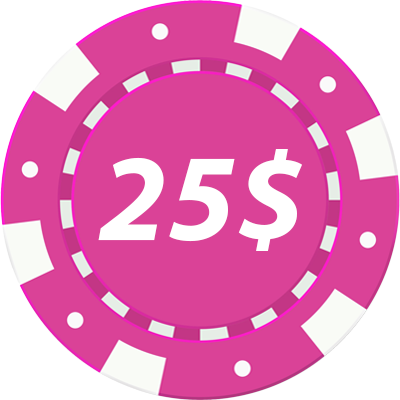
<style>
.page{position:relative;width:400px;height:400px;background:#da4297}
.page>*{position:absolute;margin:0}
.t1{font:125px "MyriadPro-BoldIt";letter-spacing:0.01em;color:#ffffff}
</style>
<div class="page">
<p class="t1" style="left:98px;top:149px;width:204px;height:102px">25$</p>
</div>
